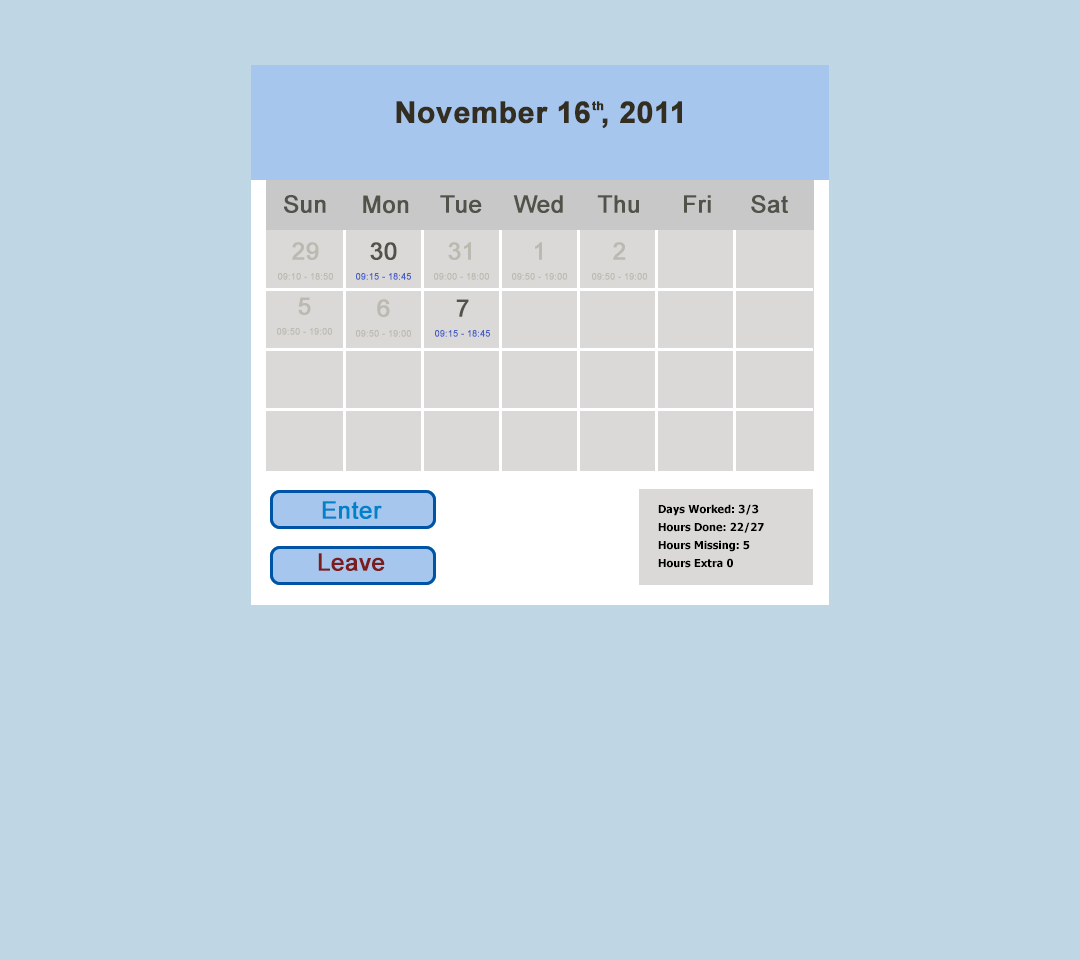
<style>
.page{position:relative;width:1080px;height:960px;background:#bfd6e5}
.page>*{position:absolute;margin:0}
.t1{font:30px "Arial-BoldMT";color:#332e20;font-weight:bold}
.t2{font:12px "Arial-BoldMT";color:#332e20;font-weight:bold}
.t3{font:24px "ArialMT";color:#51534a;font-weight:bold}
.t4{font:9px/20px "ArialMT";color:#bbbab0;font-weight:bold}
.t5{font:24px/20px "ArialMT";color:#bbbab0;font-weight:bold}
.t6{font:9px/20px "ArialMT";color:#435cc8;font-weight:bold}
.t7{font:24px/20px "ArialMT";color:#51534a;font-weight:bold}
.t8{font:24px "ArialMT";color:#0082ca;font-weight:bold}
.t9{font:11px/18px "Tahoma-Bold";color:#000000}
.t10{font:24px "ArialMT";color:#7b1d1d;font-weight:bold}
</style>
<div class="page">
<p class="t1" style="left:396px;top:101px;width:286px;height:28px">November 16 , 2011</p>
<p class="t2" style="left:592px;top:101px;width:12px;height:10px">th</p>
<p class="t3" style="left:284px;top:195px;width:42px;height:18px">Sun</p>
<p class="t3" style="left:363px;top:195px;width:46px;height:19px">Mon</p>
<p class="t3" style="left:440px;top:195px;width:42px;height:18px">Tue</p>
<p class="t3" style="left:513px;top:195px;width:50px;height:18px">Wed</p>
<p class="t3" style="left:597px;top:195px;width:42px;height:18px">Thu</p>
<p class="t3" style="left:684px;top:195px;width:27px;height:18px">Fri</p>
<p class="t3" style="left:751px;top:195px;width:37px;height:18px">Sat</p>
<p class="t4" style="left:278px;top:242px;width:55px;height:38px;text-align:center"><span class="t5">29<br></span>09:10 - 18:50</p>
<p class="t6" style="left:356px;top:242px;width:55px;height:38px;text-align:center"><span class="t7">30<br></span>09:15 - 18:45</p>
<p class="t4" style="left:434px;top:242px;width:55px;height:38px;text-align:center"><span class="t5">31<br></span>09:00 - 18:00</p>
<p class="t4" style="left:512px;top:242px;width:55px;height:38px;text-align:center"><span class="t5">1<br></span>09:50 - 19:00</p>
<p class="t4" style="left:592px;top:242px;width:55px;height:38px;text-align:center"><span class="t5">2<br></span>09:50 - 19:00</p>
<p class="t4" style="left:277px;top:297px;width:55px;height:38px;text-align:center"><span class="t5">5<br></span>09:50 - 19:00</p>
<p class="t4" style="left:356px;top:299px;width:55px;height:38px;text-align:center"><span class="t5">6<br></span>09:50 - 19:00</p>
<p class="t6" style="left:435px;top:299px;width:55px;height:38px;text-align:center"><span class="t7">7<br></span>09:15 - 18:45</p>
<p class="t8" style="left:322px;top:501px;width:60px;height:18px">Enter</p>
<p class="t9" style="left:658px;top:504px;width:106px;height:64px;text-align:justify">Days Worked: 3/3<br>Hours Done: 22/27<br>Hours Missing: 5<br>Hours Extra 0</p>
<p class="t10" style="left:318px;top:553px;width:67px;height:18px">Leave</p>
</div>
